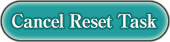
<style>
.page{position:relative;width:170px;height:42px;background:#239e9f}
.page>*{position:absolute;margin:0}
.t1{font:18px "RyuminPro-ExBold";letter-spacing:-0.04em;color:#fffffa}
</style>
<div class="page">
<p class="t1" style="left:12px;top:14px;width:145px;height:14px">Cancel Reset Task</p>
</div>
